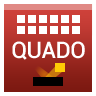
<style>
.page{position:relative;width:96px;height:96px;background:#ffffff}
.page>*{position:absolute;margin:0}
.t1{font:22.7px "Roboto-Medium";letter-spacing:-0.02em;color:#ffffff}
</style>
<div class="page">
<p class="t1" style="left:12px;top:41px;width:73px;height:19px">QUADO</p>
</div>
